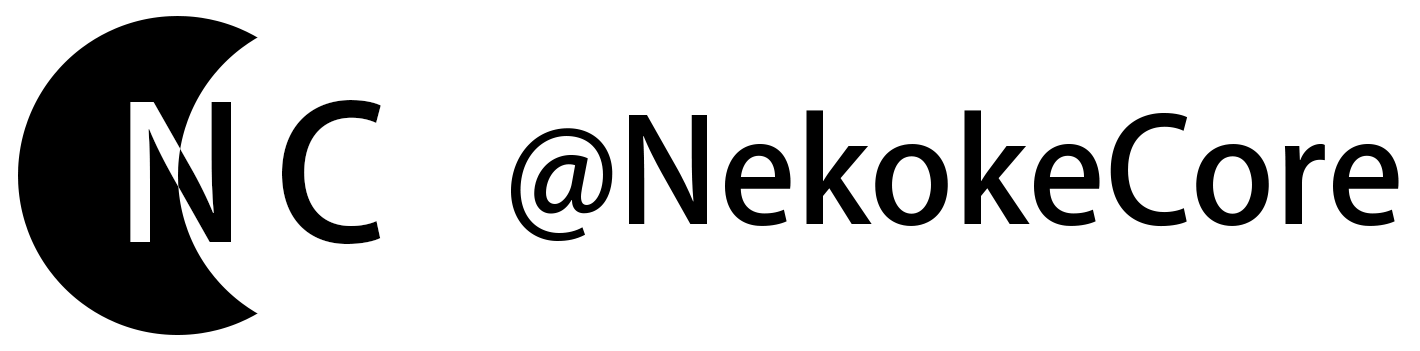
<style>
.page{position:relative;width:1420px;height:351px;background:#ffffff}
.page>*{position:absolute;margin:0}
.t1{font:183.3px "AdobeHeitiStd-Regular";color:#000000}
.t2{font:141.7px "AdobeHeitiStd-Regular";color:#000000}
</style>
<div class="page">
<p class="t1" style="left:282px;top:100px;width:99px;height:144px">C</p>
<p class="t2" style="left:511px;top:110px;width:888px;height:131px">@NekokeCore</p>
</div>
